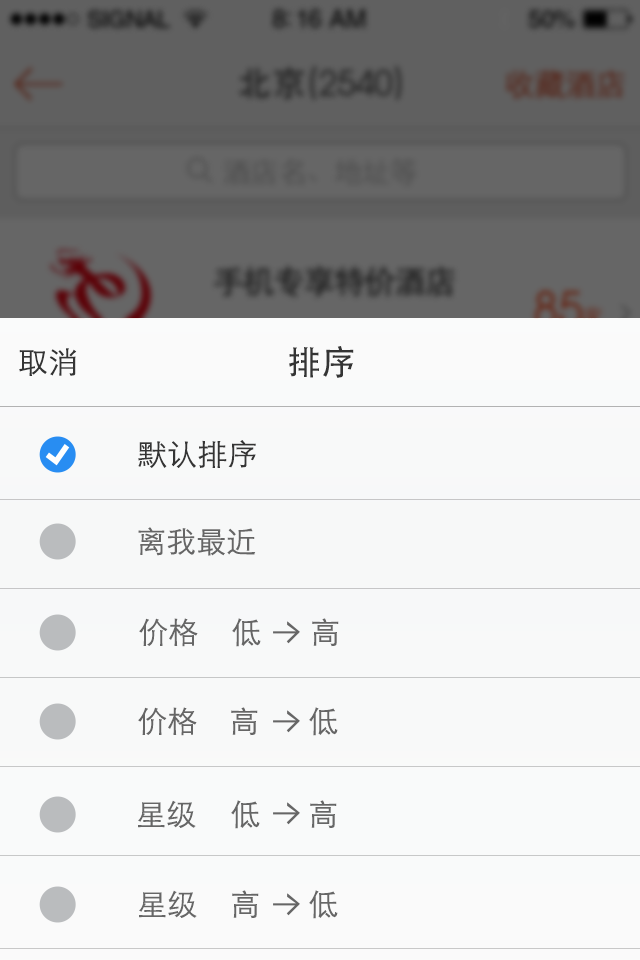
<style>
.page{position:relative;width:640px;height:960px}
.page>*{position:absolute;margin:0}
.t1{font:34px "AtillaNormal";color:#343434}
.t2{font:34px "STHeitiSC-Medium";color:#343434}
.t3{font:34px "STHeitiSC-Light";color:#343434}
.t4{font:30px "STHeitiSC-Light";color:#5b4641}
.t5{font:30px "STHeitiSC-Light";color:#343434}
.t6{font:30px "STHeitiSC-Light";color:#666666}
</style>
<div class="page">
<p class="t1" style="left:239px;top:66px;width:161px;height:33px"><span class="t2">北京</span><span class="t3">(</span>2540<span class="t3">)</span></p>
<p class="t4" style="left:504px;top:70px;width:117px;height:28px">收藏酒店</p>
<p class="t5" style="left:19px;top:348px;width:58px;height:28px">取消</p>
<p class="t2" style="left:289px;top:346px;width:65px;height:32px">排序</p>
<p class="t5" style="left:138px;top:440px;width:118px;height:28px">默认排序</p>
<p class="t6" style="left:138px;top:527px;width:118px;height:29px">离我最近</p>
<p class="t6" style="left:139px;top:618px;width:59px;height:29px">价格</p>
<p class="t6" style="left:232px;top:618px;width:29px;height:29px">低</p>
<p class="t6" style="left:312px;top:618px;width:27px;height:29px">高</p>
<p class="t6" style="left:138px;top:707px;width:59px;height:29px">价格</p>
<p class="t6" style="left:231px;top:707px;width:27px;height:29px">高</p>
<p class="t6" style="left:309px;top:707px;width:29px;height:29px">低</p>
<p class="t6" style="left:138px;top:800px;width:58px;height:28px">星级</p>
<p class="t6" style="left:231px;top:800px;width:29px;height:29px">低</p>
<p class="t6" style="left:310px;top:800px;width:27px;height:29px">高</p>
<p class="t6" style="left:139px;top:890px;width:58px;height:28px">星级</p>
<p class="t6" style="left:232px;top:890px;width:27px;height:29px">高</p>
<p class="t6" style="left:309px;top:890px;width:29px;height:29px">低</p>
</div>
